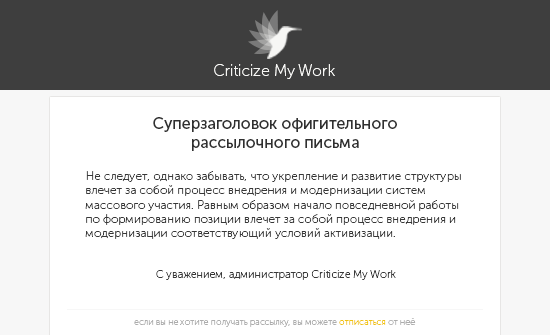
<style>
.page{position:relative;width:550px;height:335px;background:#ffffff}
.page>*{position:absolute;margin:0}
.t1{font:16px "MuseoSansCyrl-100";color:#f7f7f5}
.t2{font:16px "MuseoSansCyrl-500";color:#303030}
.t3{font:12px "MuseoSansCyrl-100";color:#383838}
.t4{font:11px "MuseoSansCyrl-100";color:#383838}
.t5{font:9px "MuseoSansCyrl-100";color:#adadad}
.t6{font:9px "MuseoSansCyrl-100";color:#f1c40f}
</style>
<div class="page">
<p class="t1" style="left:214px;top:64px;width:121px;height:15px">Criticize My Work</p>
<p class="t2" style="left:153px;top:117px;width:244px;height:34px;text-align:center">Суперзаголовок офигительного<br>рассылочного письма</p>
<p class="t3" style="left:85px;top:171px;width:376px;height:68px;text-align:right">Не следует, однако забывать, что укрепление и развитие структуры влечет за собой процесс внедрения и модернизации систем массового участия. Равным образом начало повседневной работы по формированию позиции влечет за собой процесс внедрения и модернизации соответствующий условий активизации.</p>
<p class="t4" style="left:156px;top:270px;width:240px;height:10px">С уважением, администратор Criticize My Work</p>
<p class="t5" style="left:134px;top:318px;width:282px;height:9px">если вы не хотите получать рассылку, вы можете <span class="t6">отписаться</span> от неё</p>
</div>
